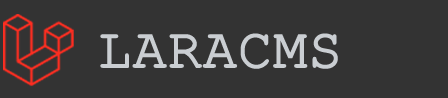
<style>
.page{position:relative;width:448px;height:98px;background:#333333}
.page>*{position:absolute;margin:0}
.t1{font:56px "CourierNewPSMT";color:#caced2;font-weight:bold}
</style>
<div class="page">
<p class="t1" style="left:100px;top:33px;width:238px;height:36px">LARACMS</p>
</div>
